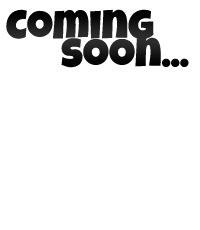
<style>
.page{position:relative;width:200px;height:230px;background:#ffffff}
.page>*{position:absolute;margin:0}
.t1{font:41px "LuckiestGuy-Regular";color:#161616}
</style>
<div class="page">
<p class="t1" style="left:6px;top:9px;width:148px;height:31px">Coming</p>
<p class="t1" style="left:61px;top:37px;width:128px;height:31px">soon...</p>
</div>
